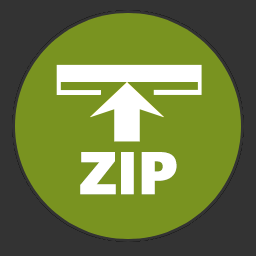
<style>
.page{position:relative;width:256px;height:256px;background:#799320}
.page>*{position:absolute;margin:0}
.t1{font:60px "SegoeUIBlack";color:#ffffff}
</style>
<div class="page">
<p class="t1" style="left:80px;top:152px;width:97px;height:43px">ZIP</p>
<p class="t1" style="left:80px;top:152px;width:97px;height:43px">ZIP</p>
</div>
